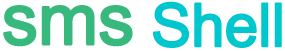
<style>
.page{position:relative;width:285px;height:51px;background:#ffffff}
.page>*{position:absolute;margin:0}
.t1{font:60px "ArialMT";letter-spacing:-0.025em;color:#00c7ce;font-weight:bold}
.t2{font:72px "ArialMT";letter-spacing:-0.025em;color:#37b97d;font-weight:bold}
</style>
<div class="page">
<p class="t1" style="left:3px;top:1px;width:279px;height:47px"><span class="t2">sms </span>Shell</p>
</div>
